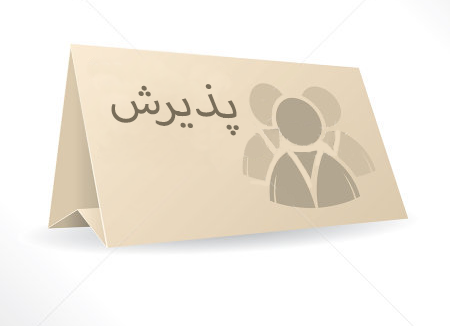
<style>
.page{position:relative;width:450px;height:326px;background:#ffffff}
.page>*{position:absolute;margin:0}
.t1{font:64.7px "MyriadArabic-Regular";color:#786d59;scale:1.15 1}
</style>
<div class="page">
<p class="t1" style="left:111px;top:84px;width:128px;height:52px;rotate:3deg">پذیرش</p>
</div>
